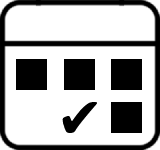
<style>
.page{position:relative;width:160px;height:150px;background:#ffffff}
.page>*{position:absolute;margin:0}
.t1{font:57px "DejaVuSans";color:#000000}
</style>
<div class="page">
<p class="t1" style="left:62px;top:102px;width:36px;height:32px">✔</p>
</div>
